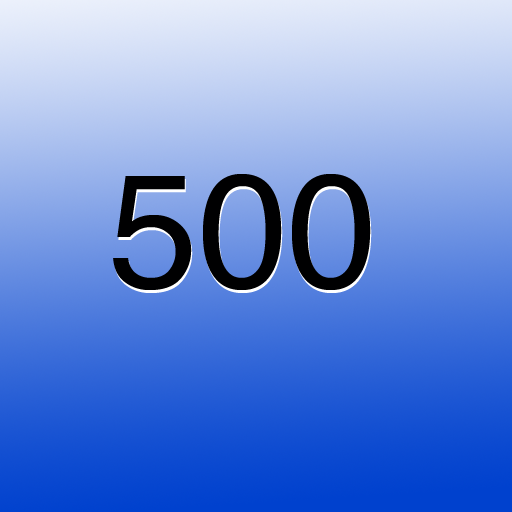
<style>
.page{position:relative;width:512px;height:512px}
.page>*{position:absolute;margin:0}
.t1{font:161.7px "Helvetica";color:#000001}
</style>
<div class="page">
<p class="t1" style="left:113px;top:174px;width:258px;height:116px">500</p>
<p class="t1" style="left:114px;top:177px;width:258px;height:116px">500</p>
</div>
